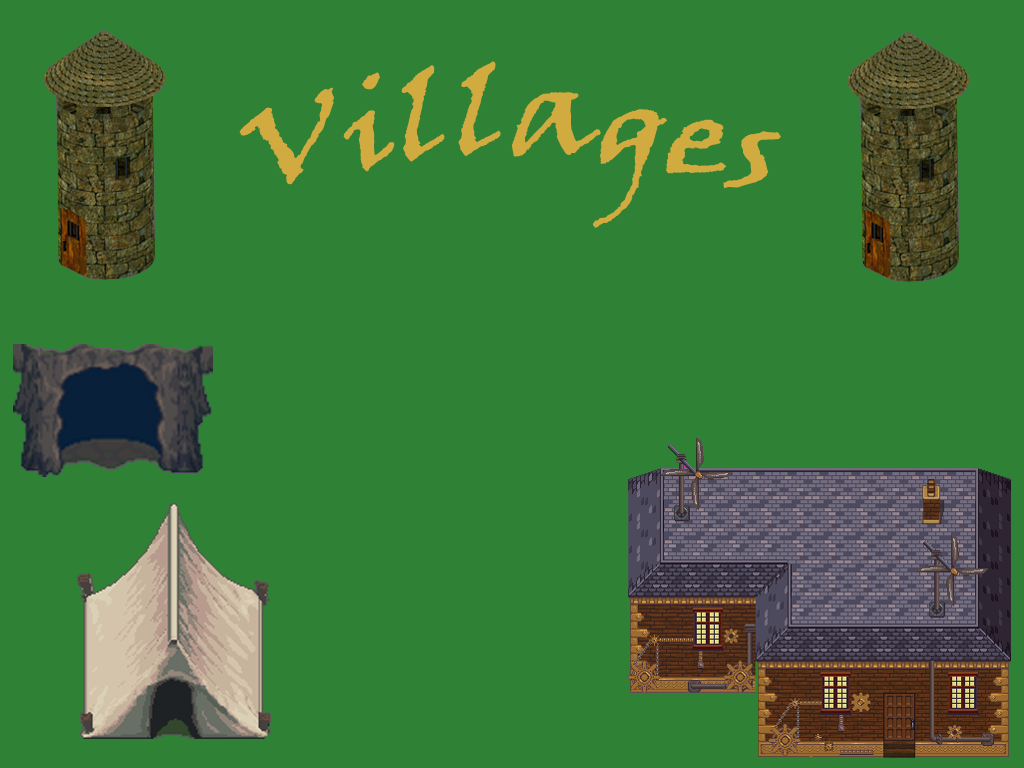
<style>
.page{position:relative;width:1024px;height:768px;background:#2f8136}
.page>*{position:absolute;margin:0}
.t1{font:120px "VinerHandITC";color:#d2ab40}
</style>
<div class="page">
<p class="t1" style="left:239px;top:61px;width:542px;height:167px">Villages</p>
</div>
